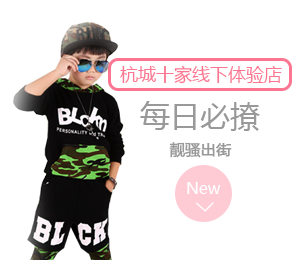
<style>
.page{position:relative;width:300px;height:260px;background:#ffffff}
.page>*{position:absolute;margin:0}
.t1{font:18px "MicrosoftYaHei";color:#fc7691}
.t2{font:30px "MicrosoftYaHei";color:#999999}
.t3{font:15.1px "MicrosoftYaHei";color:#999999;font-weight:bold}
.t4{font:15.9px "MicrosoftYaHei";color:#ffffff}
</style>
<div class="page">
<p class="t1" style="left:120px;top:65px;width:162px;height:19px">杭城十家线下体验店</p>
<p class="t2" style="left:140px;top:101px;width:120px;height:30px">每日必撩</p>
<p class="t3" style="left:169px;top:142px;width:63px;height:16px">靓骚出街</p>
<p class="t4" style="left:187px;top:182px;width:34px;height:12px">New</p>
</div>
